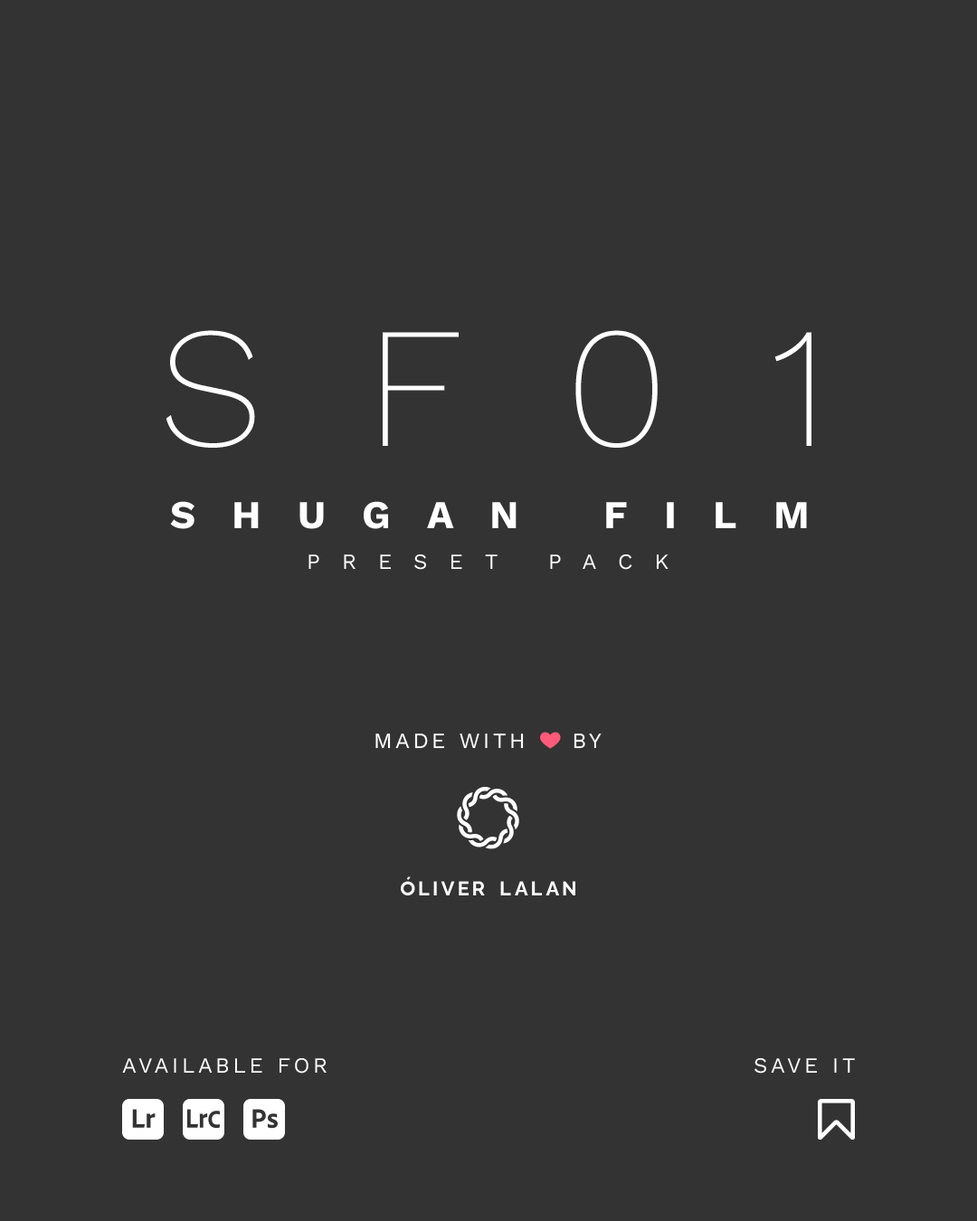
<style>
.page{position:relative;width:977px;height:1221px;background:#333333}
.page>*{position:absolute;margin:0}
.t1{font:171.8px "WorkSansRoman-ExtraLight";letter-spacing:0.597em;color:#ffffff;text-transform:uppercase}
.t2{font:39.5px "WorkSansRoman-Bold";letter-spacing:0.919em;color:#ffffff;text-transform:uppercase}
.t3{font:21.7px "WorkSans-Regular";letter-spacing:1em;color:#ffffff;text-transform:uppercase}
.t4{font:21.7px "WorkSans-Regular";letter-spacing:0.15em;color:#ffffff;text-transform:uppercase}
.t5{font:21.7px "EmojiOneColor";color:#000000}
</style>
<div class="page">
<p class="t1" style="left:165px;top:330px;width:646px;height:118px">SF01</p>
<p class="t2" style="left:170px;top:501px;width:637px;height:28px">Shugan Film</p>
<p class="t3" style="left:308px;top:554px;width:360px;height:16px">Preset pack</p>
<p class="t4" style="left:375px;top:732px;width:226px;height:17px">Made with <span class="t5">❤</span> by</p>
<p class="t4" style="left:122px;top:1058px;width:204px;height:15px">Available for</p>
<p class="t4" style="left:754px;top:1058px;width:101px;height:15px">save it</p>
</div>
